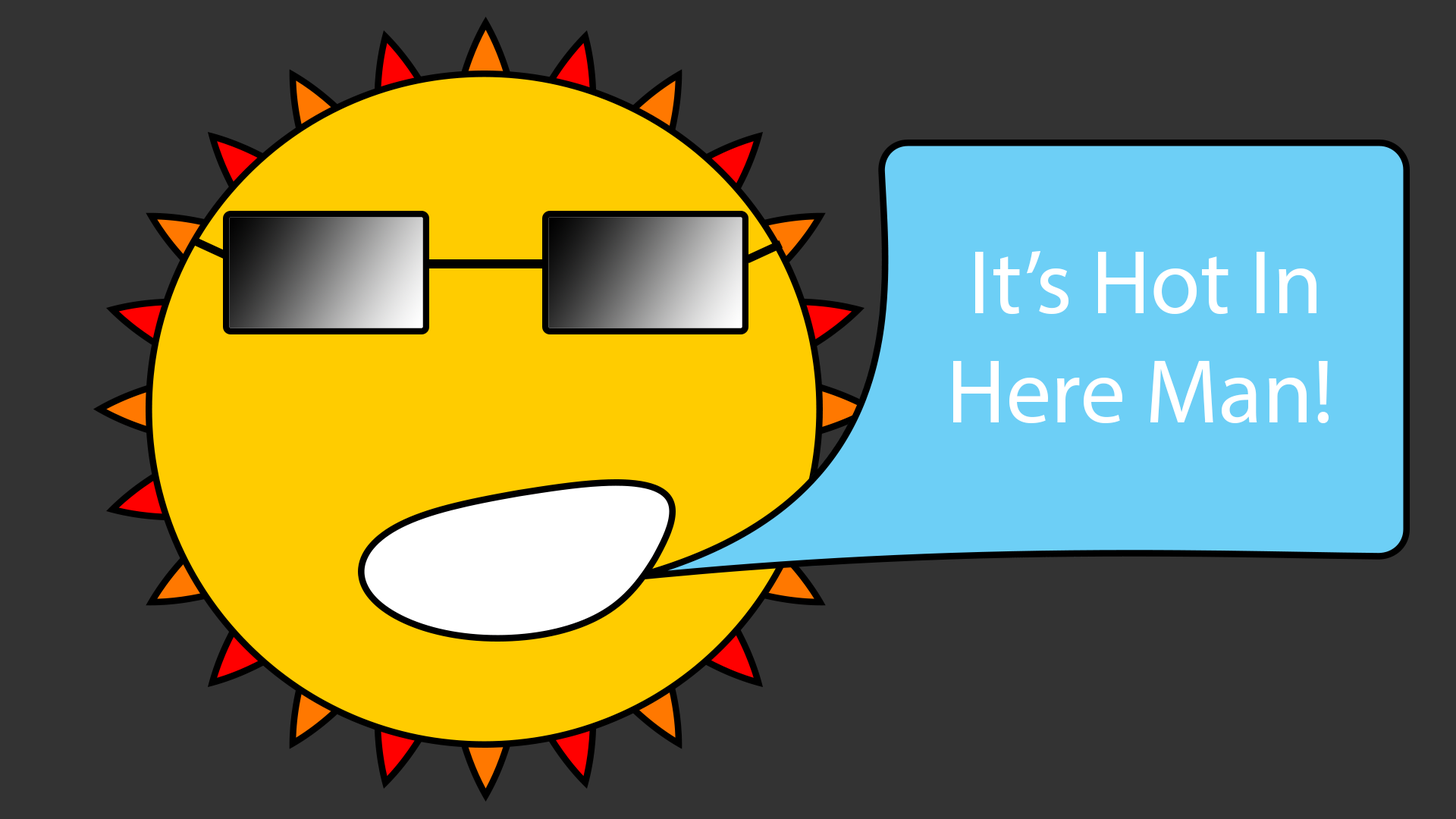
<style>
.page{position:relative;width:1456px;height:819px;background:#333333}
.page>*{position:absolute;margin:0}
.t1{font:91px "MyriadPro-Regular";color:#ffffff}
</style>
<div class="page">
<p class="t1" style="left:953px;top:251px;width:376px;height:173px;text-align:center">It’s Hot In Here Man!</p>
</div>
